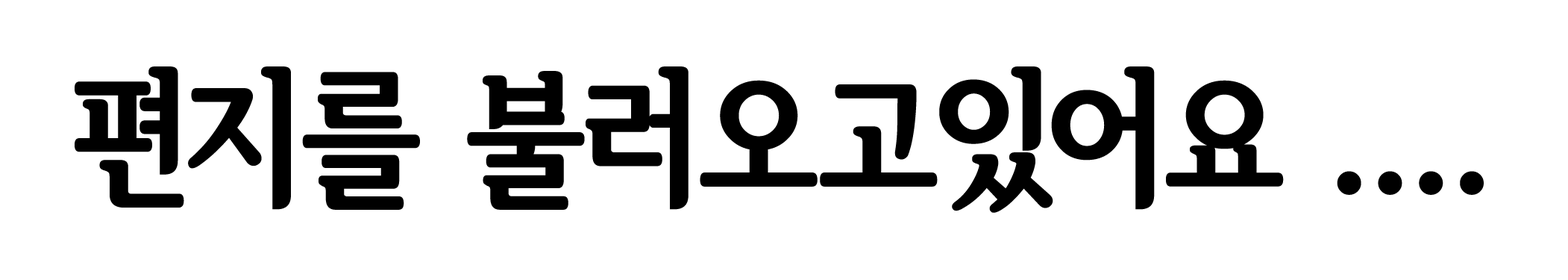
<style>
.page{position:relative;width:1568px;height:280px;background:#ffffff}
.page>*{position:absolute;margin:0}
.t1{font:149.2px "SeoulHangangCBL";color:#000000}
</style>
<div class="page">
<p class="t1" style="left:75px;top:66px;width:1409px;height:147px">편지를 불러오고있어요 ....</p>
</div>
